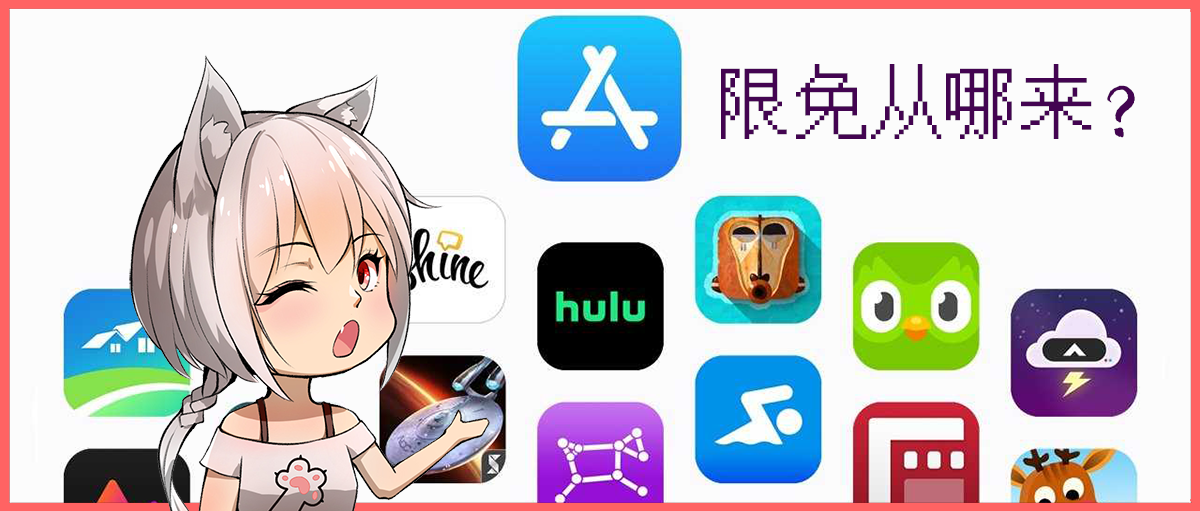
<style>
.page{position:relative;width:1200px;height:511px;background:#fcfcfc}
.page>*{position:absolute;margin:0}
.t1{font:75px "XS_GB_16_J-GB2312";color:#430451}
.t2{font:75px "Muyao-Softbrush";color:#430451}
</style>
<div class="page">
<p class="t1" style="left:721px;top:64px;width:414px;height:75px">限免从哪来<span class="t2">？</span></p>
</div>
